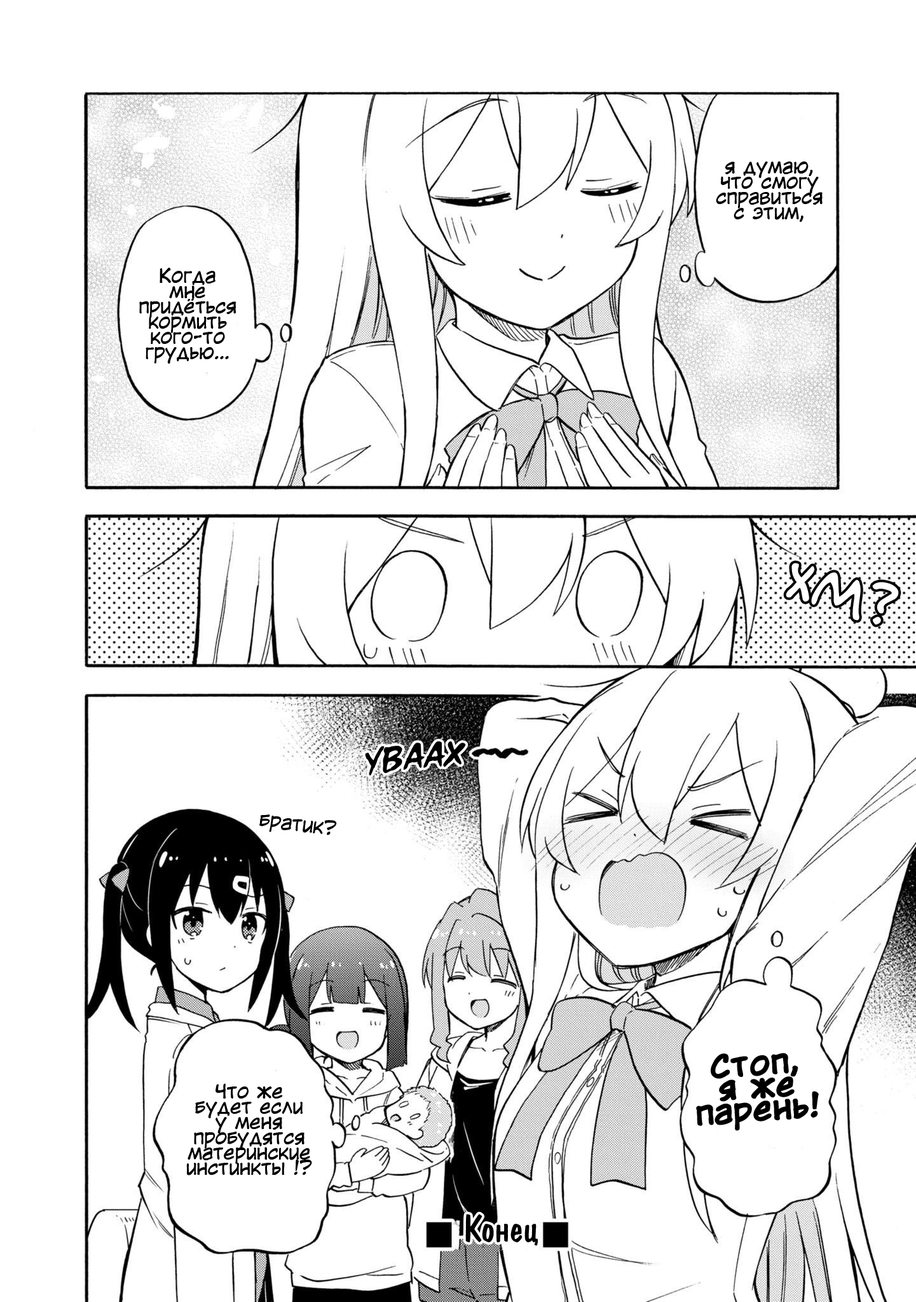
<style>
.page{position:relative;width:916px;height:1302px;background:#ffffff}
.page>*{position:absolute;margin:0}
.t1{font:19.1px/15.3px "KuraiVoice2";color:#000000}
.t2{font:30.5px "d_CCTimSaleBrush-Italic";color:#000000}
.t3{font:19.1px "KuraiVoice2";color:#000000}
.t4{font:30.5px/22.9px "KuraiVoice2-Bold";color:#000000}
.t5{font:38.1px "ADomIno";color:#000000}
</style>
<div class="page">
<p class="t1" style="left:716px;top:161px;width:107px;height:61px;text-align:center">я думаю,<br>что смогу<br>справиться<br>с этим,</p>
<p class="t1" style="left:139px;top:268px;width:97px;height:96px;text-align:center">Когда<br>мне<br>придёться<br>кормить<br>кого-то<br>грудью…</p>
<p class="t2" style="left:365px;top:741px;width:101px;height:34px;rotate:-5deg">уваах</p>
<p class="t3" style="left:259px;top:814px;width:78px;height:21px;rotate:7deg">братик?</p>
<p class="t4" style="left:696px;top:1053px;width:123px;height:78px;text-align:center;rotate:-4deg">Стоп,<br>я же<br>парень!</p>
<p class="t1" style="left:186px;top:1083px;width:126px;height:92px;text-align:center">Что же<br>будет если<br>у меня<br>пробудятся<br>материнские<br>инстинкты !?</p>
<p class="t5" style="left:465px;top:1214px;width:73px;height:31px">Конец</p>
</div>
